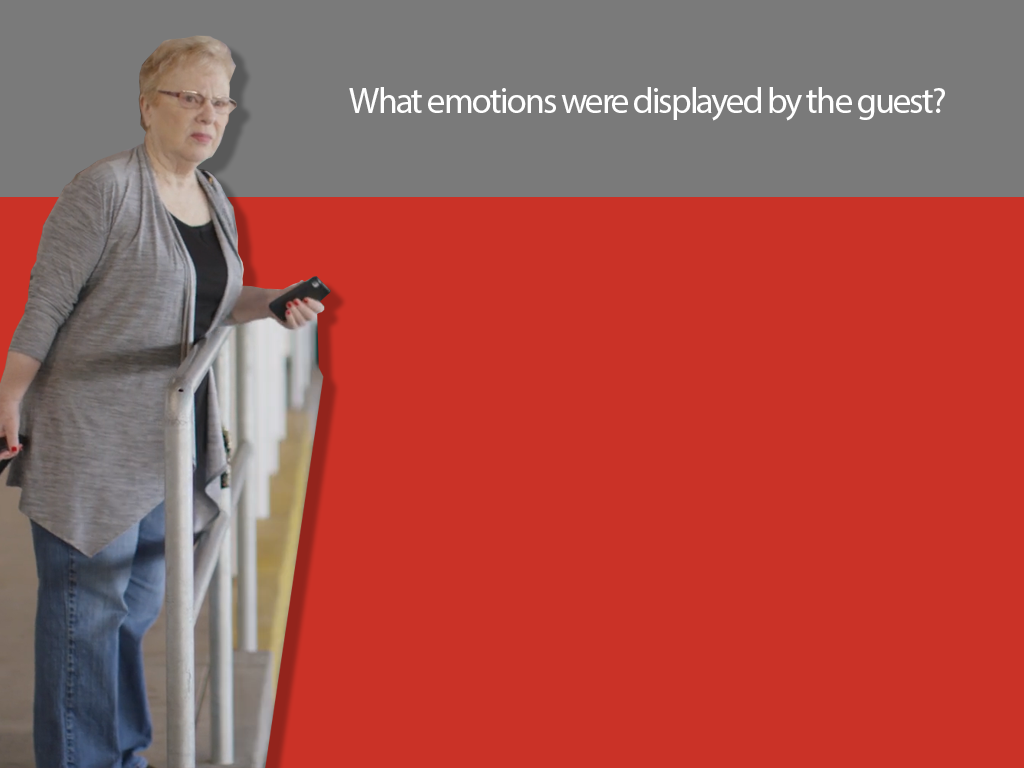
<style>
.page{position:relative;width:1024px;height:768px;background:#ca3227}
.page>*{position:absolute;margin:0}
.t1{font:36px "MyriadPro-Regular";letter-spacing:-0.05em;color:#ffffff}
</style>
<div class="page">
<p class="t1" style="left:349px;top:87px;width:596px;height:34px">What emotions were displayed by the guest?</p>
</div>
